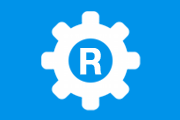
<style>
.page{position:relative;width:180px;height:120px;background:#0093e9}
.page>*{position:absolute;margin:0}
.t1{font:36.1px "HelveticaNeue-Bold";color:#ffffff;font-weight:bold;scale:0.9 1}
</style>
<div class="page">
<p class="t1" style="left:80px;top:48px;width:22px;height:27px">R</p>
</div>
